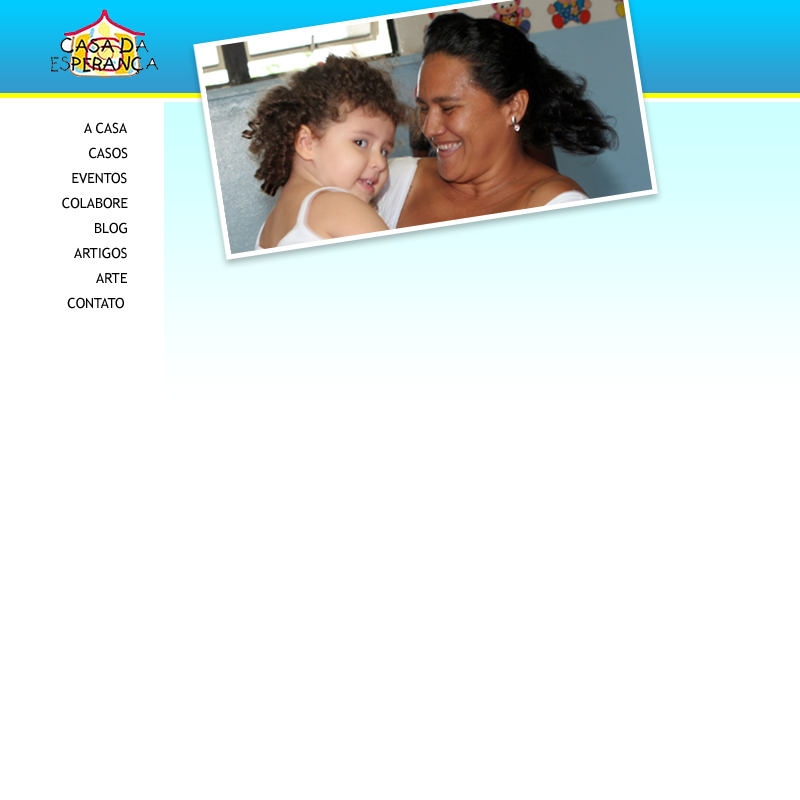
<style>
.page{position:relative;width:800px;height:800px;background:#ffffff}
.page>*{position:absolute;margin:0}
.t1{font:14px/25px "TrebuchetMS";color:#000000;text-transform:uppercase}
</style>
<div class="page">
<p class="t1" style="left:62px;top:122px;width:66px;height:187px;text-align:right">A Casa<br>Casos<br>Eventos<br>Colabore<br>Blog<br>Artigos<br>Arte<br>Contato</p>
</div>
